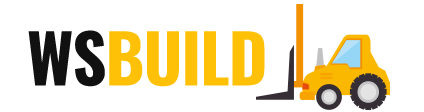
<style>
.page{position:relative;width:424px;height:112px;background:#ffffff}
.page>*{position:absolute;margin:0}
.t1{font:67px "Oswald-Bold";letter-spacing:-0.02em;color:#ffc107}
.t2{font:67px "Oswald-Bold";letter-spacing:-0.02em;color:#111111}
</style>
<div class="page">
<p class="t1" style="left:28px;top:30px;width:237px;height:57px"><span class="t2">WS</span>BUILD</p>
</div>
